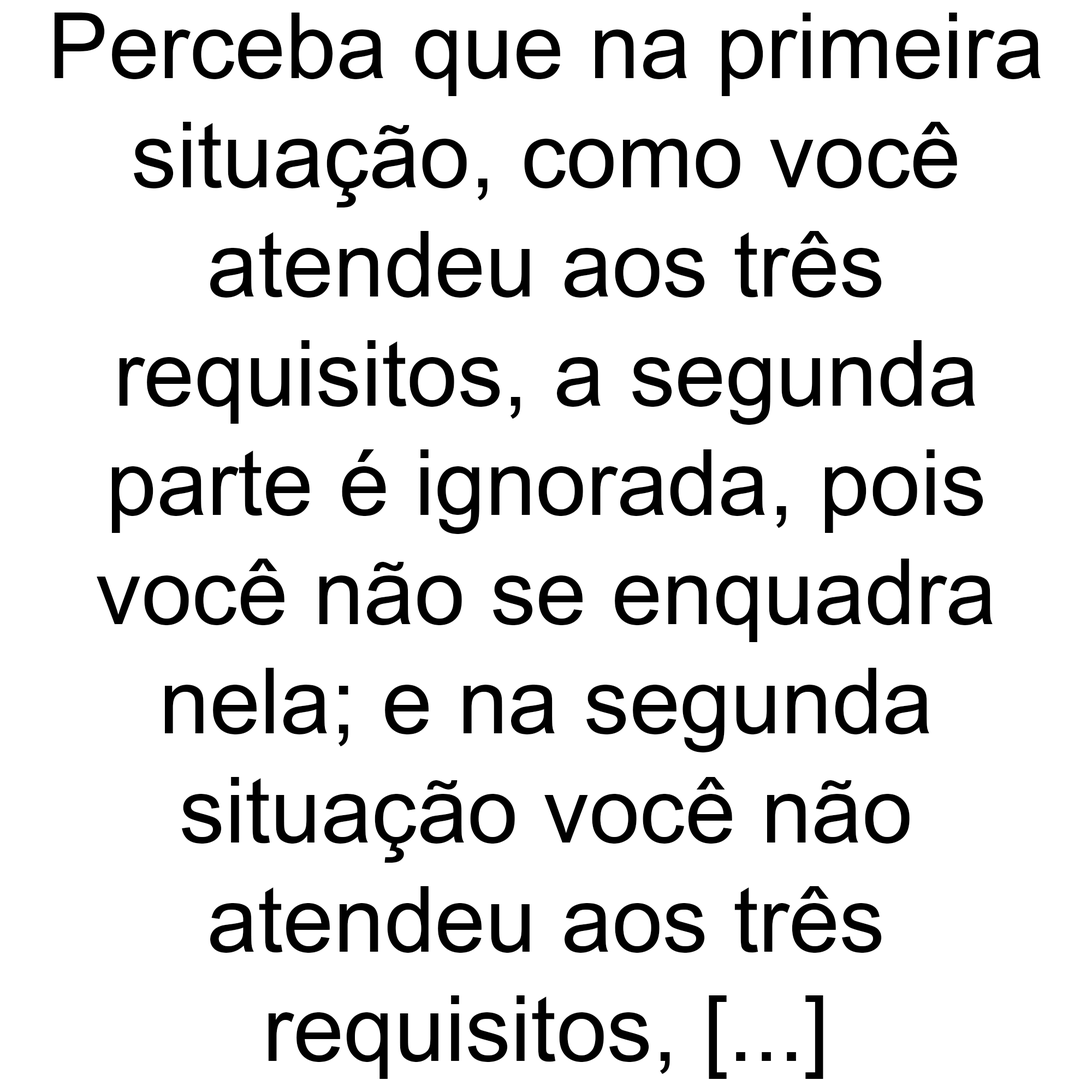
<style>
.page{position:relative;width:1092px;height:1092px;background:#ffffff}
.page>*{position:absolute;margin:0}
.t1{font:91px "ArialMT";color:#000000}
</style>
<div class="page">
<p class="t1" style="left:54px;top:13px;width:987px;height:1066px;text-align:center">Perceba que na primeira<br>situação, como você<br>atendeu aos três<br>requisitos, a segunda<br>parte é ignorada, pois<br>você não se enquadra<br>nela; e na segunda<br>situação você não<br>atendeu aos três<br>requisitos, [...]</p>
</div>
